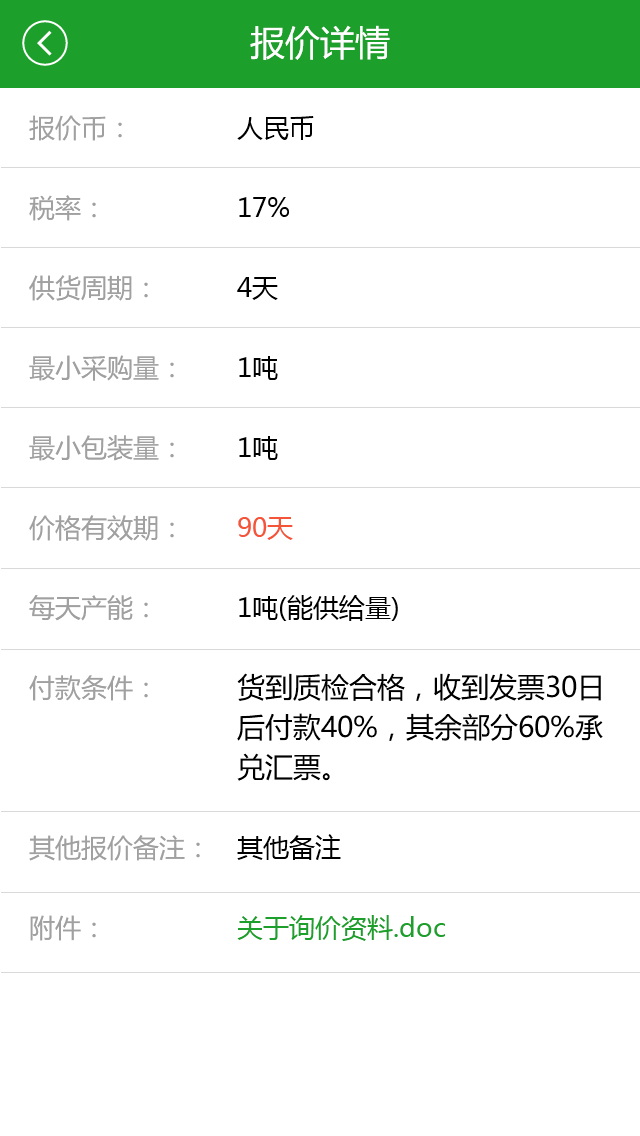
<style>
.page{position:relative;width:640px;height:1136px;background:#ffffff}
.page>*{position:absolute;margin:0}
.t1{font:35px "MicrosoftYaHei";color:#ffffff}
.t2{font:26px/80px "MicrosoftYaHei";color:#a0a0a0}
.t3{font:26px/80px "MicrosoftYaHei";color:#000000}
.t4{font:26px/80px "MicrosoftYaHei";color:#f45438}
.t5{font:26px/35px "MicrosoftYaHei";color:#1da02b}
.t6{font:28px/40px "MicrosoftYaHei";color:#000000}
</style>
<div class="page">
<p class="t1" style="left:250px;top:25px;width:140px;height:35px">报价详情</p>
<p class="t2" style="left:29px;top:115px;width:171px;height:826px">报价币：<br>税率：<br>供货周期：<br>最小采购量：<br>最小包装量：<br>价格有效期：<br>每天产能：<br>付款条件：<br><br>其他报价备注：<br>附件：</p>
<p class="t3" style="left:237px;top:116px;width:208px;height:825px">人民币<br>17%<br>4天<br>1吨<br>1吨<br><span class="t4">90天<br></span>1吨(能供给量)<br><br><br>其他备注<br><span class="t5">关于询价资料.doc</span></p>
<p class="t6" style="left:237px;top:673px;width:366px;height:108px">货到质检合格，收到发票30日后付款40%，其余部分60%承兑汇票。</p>
</div>
